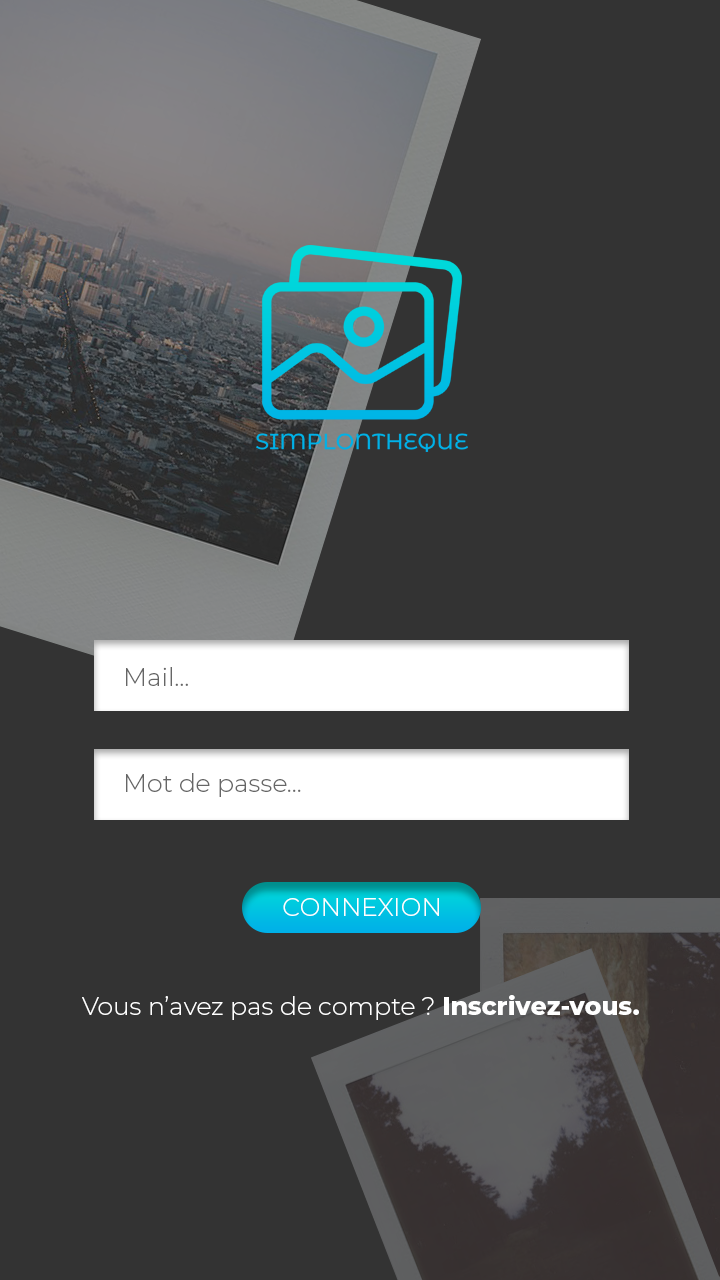
<style>
.page{position:relative;width:720px;height:1280px;background:#333333}
.page>*{position:absolute;margin:0}
.t1{font:25px "Montserrat-Light";color:#666666}
.t2{font:25px "Montserrat-Light";color:#ffffff}
.t3{font:25px "Montserrat-ExtraBold";color:#ffffff}
</style>
<div class="page">
<p class="t1" style="left:126px;top:667px;width:62px;height:19px">Mail...</p>
<p class="t1" style="left:126px;top:773px;width:175px;height:24px">Mot de passe...</p>
<p class="t2" style="left:283px;top:898px;width:156px;height:18px">CONNEXION</p>
<p class="t2" style="left:82px;top:995px;width:557px;height:25px">Vous n’avez pas de compte ? <span class="t3">Inscrivez-vous.</span></p>
</div>
